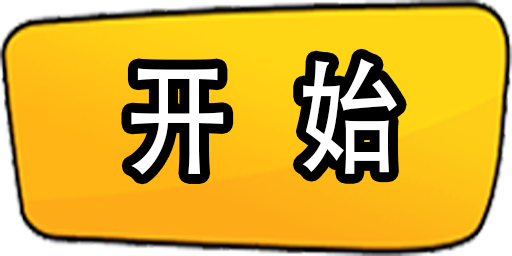
<style>
.page{position:relative;width:512px;height:256px}
.page>*{position:absolute;margin:0}
.t1{font:124.5px "AdobeHeitiStd-Regular";letter-spacing:0.64em;color:#ffffff;scale:0.84 1}
.t2{font:124.5px "MyriadPro-Regular";letter-spacing:0.012em;color:#ffffff;scale:0.84 1}
</style>
<div class="page">
<p class="t1" style="left:131px;top:58px;width:266px;height:117px"><span class="t2">  </span>开始</p>
</div>
